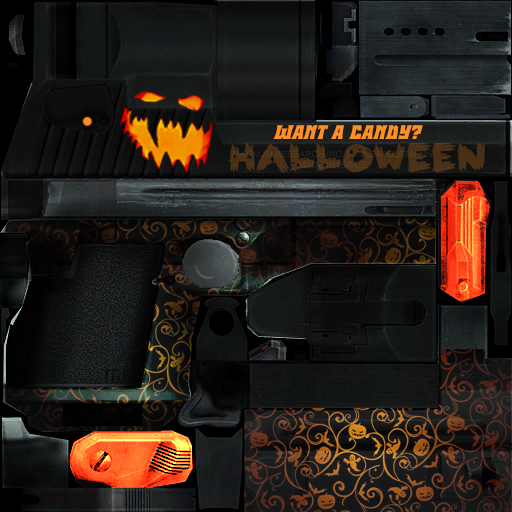
<style>
.page{position:relative;width:512px;height:512px}
.page>*{position:absolute;margin:0}
.t1{font:21.6px "HalloweenHex-Italic";color:#fe8f25}
.t2{font:26.6px "ScaryHorrOrs";color:#4a3117}
</style>
<div class="page">
<p class="t1" style="left:273px;top:125px;width:150px;height:14px">Want a candy?</p>
<p class="t2" style="left:228px;top:143px;width:257px;height:30px">Halloween</p>
</div>
